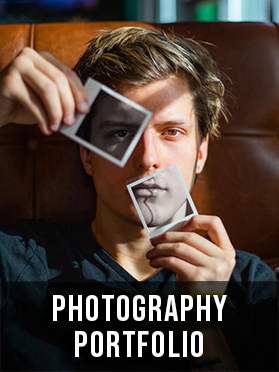
<style>
.page{position:relative;width:279px;height:372px}
.page>*{position:absolute;margin:0}
.t1{font:36px/36px "BebasNeue-Regular";letter-spacing:0.05em;color:#ffffff}
</style>
<div class="page">
<p class="t1" style="left:53px;top:295px;width:174px;height:62px;text-align:center">Photography <br>Portfolio</p>
</div>
